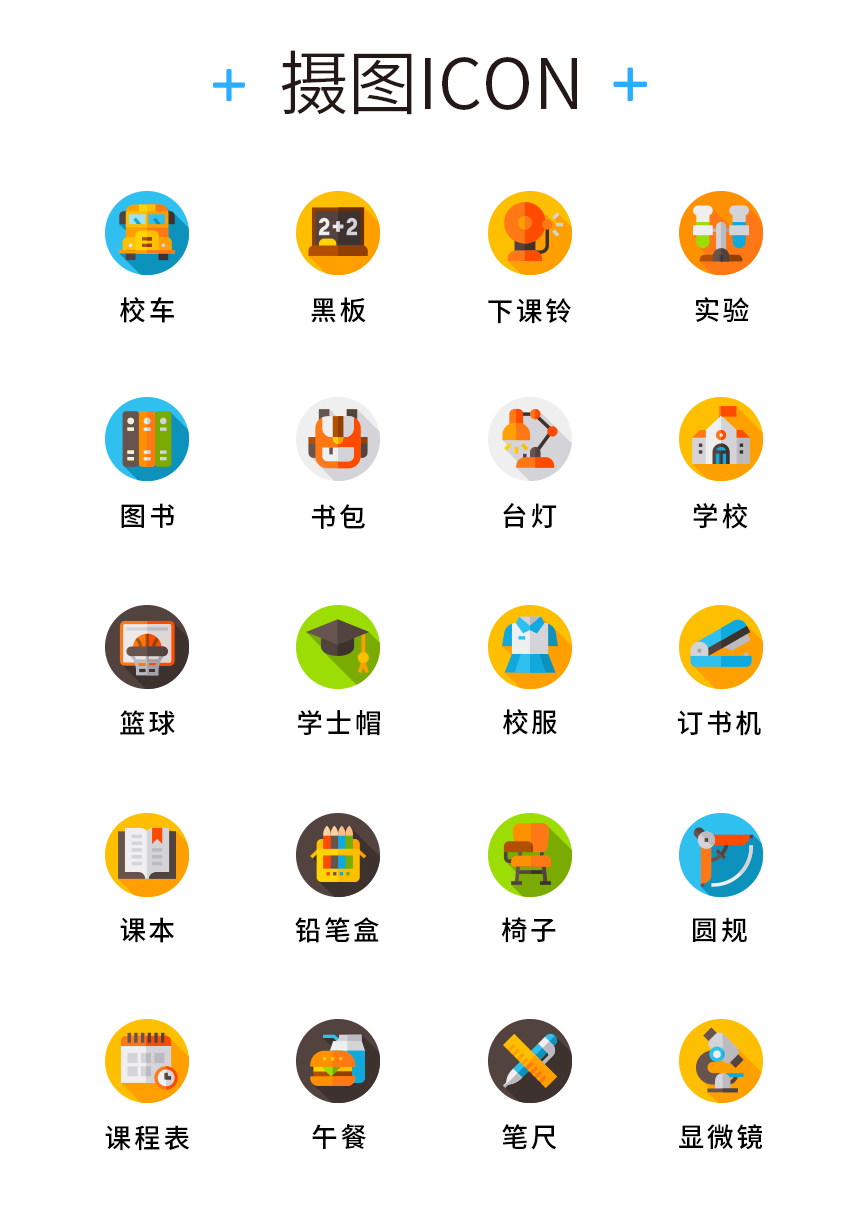
<style>
.page{position:relative;width:866px;height:1215px;background:#ffffff}
.page>*{position:absolute;margin:0}
.t1{font:70px "SourceHanSansCN-Normal";color:#231815}
.t2{font:27px "SourceHanSansCN-Medium";letter-spacing:0.1em;color:#000000}
</style>
<div class="page">
<p class="t1" style="left:281px;top:50px;width:296px;height:65px">摄图ICON</p>
<p class="t2" style="left:120px;top:297px;width:54px;height:26px">校车</p>
<p class="t2" style="left:311px;top:297px;width:55px;height:26px">黑板</p>
<p class="t2" style="left:488px;top:298px;width:83px;height:26px">下课铃</p>
<p class="t2" style="left:695px;top:297px;width:54px;height:25px">实验</p>
<p class="t2" style="left:121px;top:503px;width:53px;height:25px">图书</p>
<p class="t2" style="left:311px;top:504px;width:54px;height:25px">书包</p>
<p class="t2" style="left:503px;top:503px;width:54px;height:25px">台灯</p>
<p class="t2" style="left:693px;top:503px;width:55px;height:26px">学校</p>
<p class="t2" style="left:120px;top:710px;width:55px;height:25px">篮球</p>
<p class="t2" style="left:297px;top:710px;width:83px;height:26px">学士帽</p>
<p class="t2" style="left:503px;top:709px;width:54px;height:26px">校服</p>
<p class="t2" style="left:677px;top:710px;width:84px;height:26px">订书机</p>
<p class="t2" style="left:120px;top:917px;width:54px;height:26px">课本</p>
<p class="t2" style="left:295px;top:917px;width:84px;height:26px">铅笔盒</p>
<p class="t2" style="left:501px;top:917px;width:55px;height:26px">椅子</p>
<p class="t2" style="left:693px;top:917px;width:54px;height:26px">圆规</p>
<p class="t2" style="left:105px;top:1125px;width:84px;height:26px">课程表</p>
<p class="t2" style="left:312px;top:1124px;width:54px;height:26px">午餐</p>
<p class="t2" style="left:502px;top:1124px;width:55px;height:26px">笔尺</p>
<p class="t2" style="left:679px;top:1124px;width:84px;height:26px">显微镜</p>
</div>
